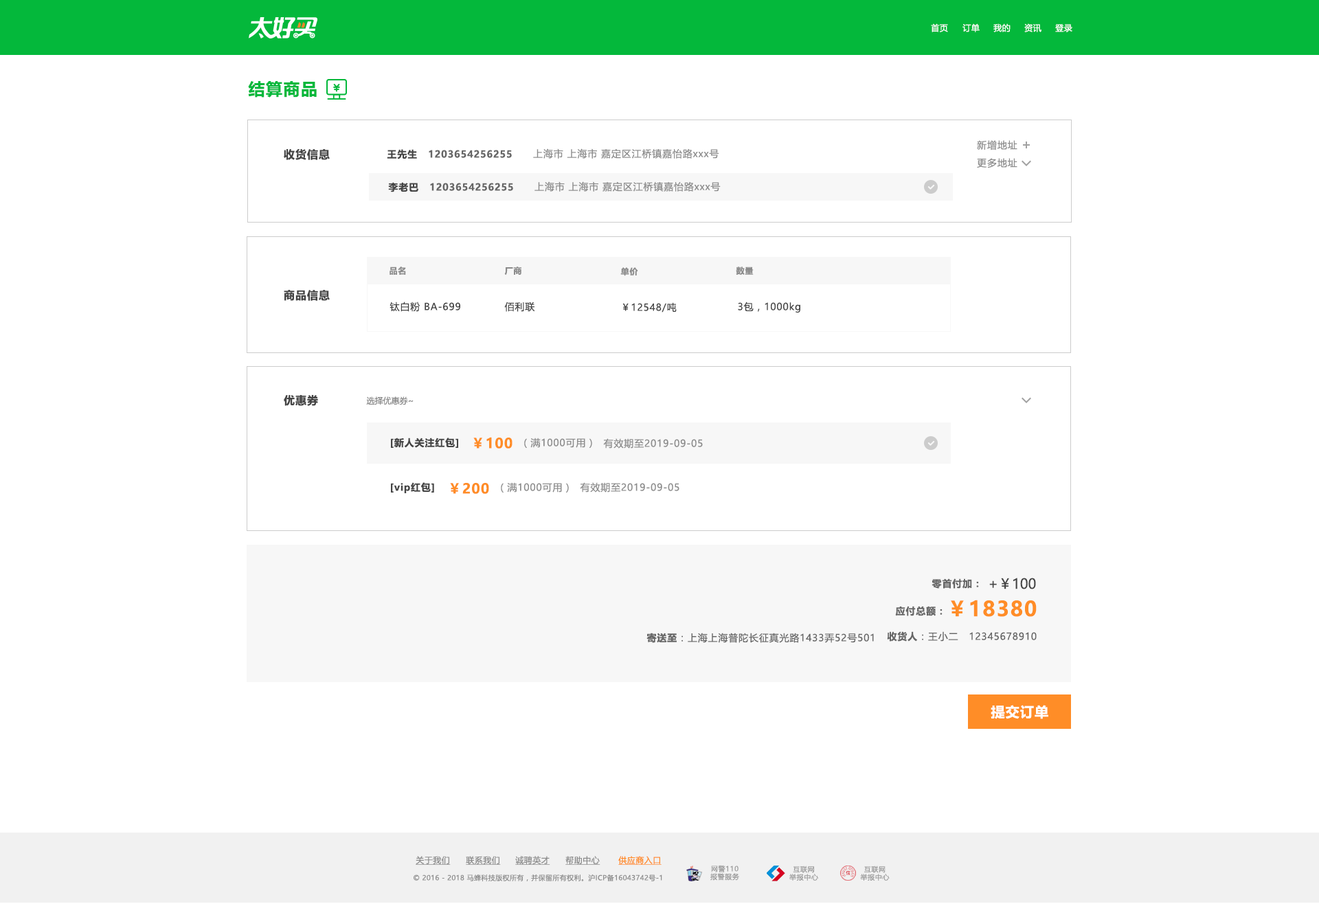
<style>
.page{position:relative;width:1319px;height:904px;background:#ffffff}
.page>*{position:absolute;margin:0}
.t1{font:8.2px "MicrosoftYaHeiUI";letter-spacing:0.04em;color:#ffffff}
.t2{font:16.5px "MicrosoftYaHeiUI-Bold";letter-spacing:0.06em;color:#04b83b}
.t3{font:11px "MicrosoftYaHeiUI-Bold";letter-spacing:0.06em;color:#444444}
.t4{font:9.6px "MicrosoftYaHeiUI-Bold";letter-spacing:0.06em;color:#444444}
.t5{font:9.6px "MicrosoftYaHeiUI-Bold";letter-spacing:0.06em;color:#666666}
.t6{font:9.6px "MicrosoftYaHeiUI";letter-spacing:0.06em;color:#8c8c8c}
.t7{font:8.2px "MicrosoftYaHeiUI-Bold";letter-spacing:0.06em;color:#8c8c8c}
.t8{font:9.6px "MicrosoftYaHeiUI";letter-spacing:0.06em;color:#444444}
.t9{font:8.2px "MicrosoftYaHeiUI";color:#888888}
.t10{font:13.7px "MicrosoftYaHeiUI-Bold";letter-spacing:0.06em;color:#ff8d27}
.t11{font:13.7px "MicrosoftYaHeiUI";color:#444444}
.t12{font:20.5px "MicrosoftYaHeiUI-Bold";letter-spacing:0.06em;color:#ff8d27}
.t13{font:9.6px "MicrosoftYaHeiUI";letter-spacing:0.06em;color:#666666}
.t14{font:13.7px "MicrosoftYaHeiUI-Bold";letter-spacing:0.06em;color:#ffffff}
.t15{font:8.2px "MicrosoftYaHeiUI";letter-spacing:0.04em;color:#8c8c8c;text-decoration:underline}
.t16{font:8.2px "MicrosoftYaHeiUI";letter-spacing:0.04em;color:#ff8b25;text-decoration:underline}
.t17{font:6.9px/8px "MicrosoftYaHei";letter-spacing:0.06em;color:#999999}
.t18{font:6.9px "MicrosoftYaHeiUI";letter-spacing:0.04em;color:#8c8c8c}
</style>
<div class="page">
<p class="t1" style="left:931px;top:23px;width:17px;height:9px">首页</p>
<p class="t1" style="left:962px;top:23px;width:18px;height:9px">订单</p>
<p class="t1" style="left:993px;top:23px;width:18px;height:9px">我的</p>
<p class="t1" style="left:1024px;top:23px;width:17px;height:9px">资讯</p>
<p class="t1" style="left:1055px;top:24px;width:17px;height:8px">登录</p>
<p class="t2" style="left:248px;top:81px;width:69px;height:17px">结算商品</p>
<p class="t3" style="left:284px;top:149px;width:46px;height:11px">收货信息</p>
<p class="t4" style="left:387px;top:149px;width:30px;height:10px">王先生</p>
<p class="t5" style="left:429px;top:150px;width:83px;height:8px">1203654256255</p>
<p class="t6" style="left:533px;top:148px;width:186px;height:11px">上海市 上海市 嘉定区江桥镇嘉怡路xxx号</p>
<p class="t6" style="left:977px;top:140px;width:40px;height:10px">新增地址</p>
<p class="t6" style="left:977px;top:158px;width:40px;height:10px">更多地址</p>
<p class="t4" style="left:388px;top:182px;width:30px;height:10px">李老巴</p>
<p class="t5" style="left:430px;top:183px;width:83px;height:8px">1203654256255</p>
<p class="t6" style="left:534px;top:181px;width:187px;height:11px">上海市 上海市 嘉定区江桥镇嘉怡路xxx号</p>
<p class="t7" style="left:390px;top:267px;width:16px;height:8px">品名</p>
<p class="t7" style="left:504px;top:267px;width:17px;height:8px">厂商</p>
<p class="t7" style="left:620px;top:267px;width:18px;height:9px">单价</p>
<p class="t7" style="left:736px;top:267px;width:18px;height:8px">数量</p>
<p class="t3" style="left:284px;top:290px;width:46px;height:11px">商品信息</p>
<p class="t8" style="left:390px;top:302px;width:70px;height:10px">钛白粉 BA-699</p>
<p class="t8" style="left:504px;top:302px;width:31px;height:10px">佰利联</p>
<p class="t8" style="left:622px;top:302px;width:55px;height:11px">￥12548/吨</p>
<p class="t8" style="left:738px;top:302px;width:62px;height:11px">3包，1000kg</p>
<p class="t3" style="left:284px;top:395px;width:34px;height:11px">优惠券</p>
<p class="t9" style="left:366px;top:396px;width:48px;height:9px">选择优惠券~</p>
<p class="t4" style="left:391px;top:438px;width:67px;height:10px">[新人关注红包]</p>
<p class="t10" style="left:473px;top:437px;width:39px;height:12px">￥100</p>
<p class="t6" style="left:524px;top:438px;width:68px;height:10px">（满1000可用）</p>
<p class="t6" style="left:603px;top:438px;width:100px;height:11px">有效期至2019-09-05</p>
<p class="t4" style="left:391px;top:482px;width:43px;height:11px">[vip红包]</p>
<p class="t10" style="left:450px;top:483px;width:39px;height:11px">￥200</p>
<p class="t6" style="left:501px;top:482px;width:68px;height:11px">（满1000可用）</p>
<p class="t6" style="left:580px;top:482px;width:99px;height:11px">有效期至2019-09-05</p>
<p class="t5" style="left:932px;top:578px;width:47px;height:11px">零首付加：</p>
<p class="t11" style="left:989px;top:578px;width:47px;height:11px">+￥100</p>
<p class="t5" style="left:895px;top:606px;width:48px;height:10px">应付总额：</p>
<p class="t12" style="left:951px;top:600px;width:86px;height:17px">￥18380</p>
<p class="t13" style="left:646px;top:633px;width:228px;height:10px"><span class="t5">寄送至</span>：上海上海普陀长征真光路1433弄52号501</p>
<p class="t13" style="left:887px;top:631px;width:150px;height:11px"><span class="t5">收货人</span>：王小二   12345678910</p>
<p class="t14" style="left:991px;top:705px;width:57px;height:14px">提交订单</p>
<p class="t15" style="left:416px;top:856px;width:35px;height:9px">关于我们</p>
<p class="t15" style="left:466px;top:856px;width:35px;height:9px">联系我们</p>
<p class="t15" style="left:515px;top:856px;width:35px;height:9px">诚聘英才</p>
<p class="t15" style="left:565px;top:856px;width:35px;height:9px">帮助中心</p>
<p class="t16" style="left:618px;top:856px;width:44px;height:9px">供应商入口</p>
<p class="t17" style="left:710px;top:865px;width:29px;height:16px;text-align:center">网警110<br>报警服务</p>
<p class="t17" style="left:789px;top:866px;width:29px;height:15px;text-align:center">互联网<br>举报中心</p>
<p class="t17" style="left:860px;top:866px;width:30px;height:15px;text-align:center">互联网<br>举报中心</p>
<p class="t18" style="left:414px;top:874px;width:248px;height:7px">© 2016 - 2018 马蜂科技版权所有，并保留所有权利。沪ICP备16043742号-1</p>
</div>
